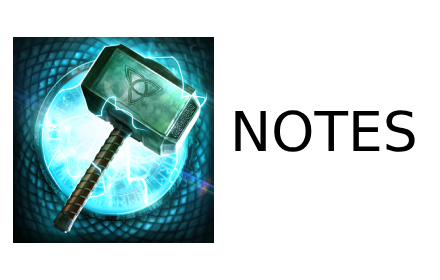
<style>
.page{position:relative;width:440px;height:280px;background:#ffffff}
.page>*{position:absolute;margin:0}
.t1{font:55px "DejaVuSans";color:#000000}
</style>
<div class="page">
<p class="t1" style="left:235px;top:110px;width:180px;height:42px">NOTES</p>
</div>
